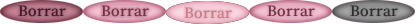
<style>
.page{position:relative;width:415px;height:24px;background:#ffffff}
.page>*{position:absolute;margin:0}
.t1{font:17px "OfficialFateFont-Medium";color:#441a25;font-weight:bold}
.t2{font:17px "OfficialFateFont-Medium";color:#763145;font-weight:bold}
.t3{font:17px "OfficialFateFont-Medium";color:#2f2f2f;font-weight:bold}
.t4{font:17px "OfficialFateFont-Medium";color:#c57e89;font-weight:bold}
</style>
<div class="page">
<p class="t1" style="left:18px;top:5px;width:48px;height:12px">Borrar</p>
<p class="t2" style="left:101px;top:5px;width:48px;height:12px">Borrar</p>
<p class="t2" style="left:267px;top:5px;width:48px;height:12px">Borrar</p>
<p class="t3" style="left:350px;top:5px;width:48px;height:12px">Borrar</p>
<p class="t4" style="left:184px;top:7px;width:48px;height:12px">Borrar</p>
</div>
